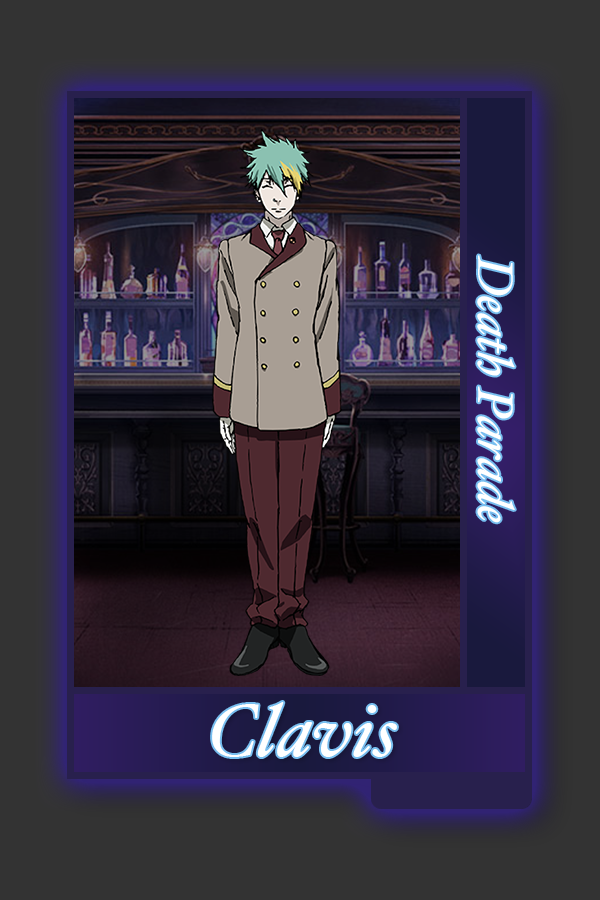
<style>
.page{position:relative;width:600px;height:900px;background:#333333}
.page>*{position:absolute;margin:0}
.t1{font:50px "HoeflerText-Italic";color:#ffffff}
.t2{font:75px "HoeflerText-Italic";color:#ffffff}
</style>
<div class="page">
<p class="t1" style="left:477px;top:255px;width:38px;height:268px;rotate:90deg">Death Parade</p>
<p class="t2" style="left:212px;top:702px;width:185px;height:55px">Clavis</p>
</div>
